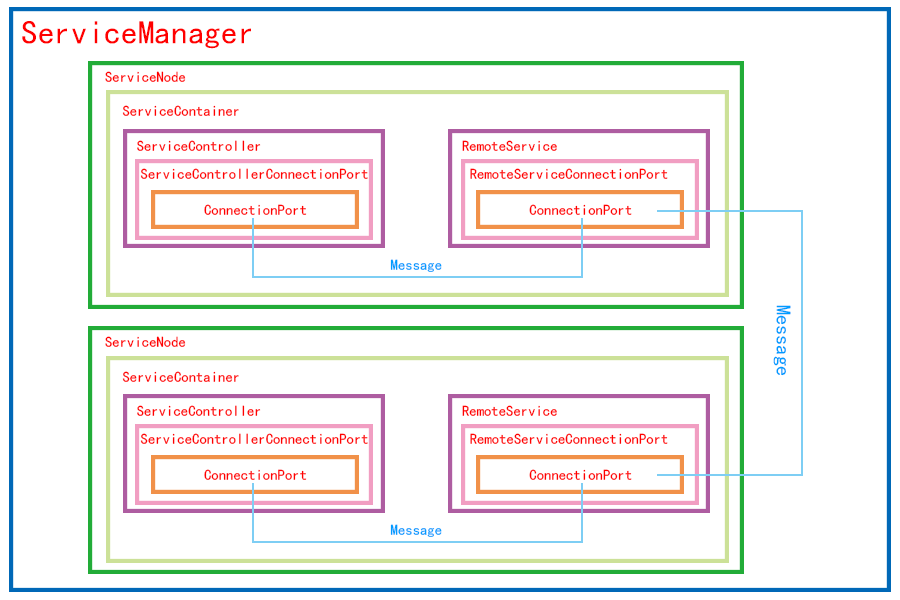
<style>
.page{position:relative;width:900px;height:600px;background:#ffffff}
.page>*{position:absolute;margin:0}
.t1{font:33.3px "SimHei";color:#ff0000}
.t2{font:14.7px "SimHei";color:#ff0000}
.t3{font:14.7px "SimHei";color:#009cff}
.t4{font:20.7px "SimHei";color:#009cff}
</style>
<div class="page">
<p class="t1" style="left:22px;top:21px;width:229px;height:28px">ServiceManager</p>
<p class="t2" style="left:105px;top:71px;width:81px;height:11px">ServiceNode</p>
<p class="t2" style="left:122px;top:105px;width:117px;height:11px">ServiceContainer</p>
<p class="t2" style="left:137px;top:140px;width:124px;height:11px">ServiceController</p>
<p class="t2" style="left:462px;top:140px;width:95px;height:11px">RemoteService</p>
<p class="t2" style="left:140px;top:168px;width:228px;height:11px">ServiceControllerConnectionPort</p>
<p class="t2" style="left:470px;top:168px;width:198px;height:11px">RemoteServiceConnectionPort</p>
<p class="t2" style="left:204px;top:204px;width:103px;height:11px">ConnectionPort</p>
<p class="t2" style="left:529px;top:204px;width:103px;height:11px">ConnectionPort</p>
<p class="t3" style="left:390px;top:259px;width:52px;height:13px">Message</p>
<p class="t4" style="left:773px;top:305px;width:18px;height:71px;rotate:90deg">Message</p>
<p class="t2" style="left:105px;top:336px;width:81px;height:11px">ServiceNode</p>
<p class="t2" style="left:122px;top:371px;width:117px;height:11px">ServiceContainer</p>
<p class="t2" style="left:137px;top:405px;width:124px;height:11px">ServiceController</p>
<p class="t2" style="left:462px;top:405px;width:95px;height:11px">RemoteService</p>
<p class="t2" style="left:140px;top:433px;width:228px;height:11px">ServiceControllerConnectionPort</p>
<p class="t2" style="left:470px;top:433px;width:198px;height:11px">RemoteServiceConnectionPort</p>
<p class="t2" style="left:204px;top:469px;width:103px;height:11px">ConnectionPort</p>
<p class="t2" style="left:529px;top:469px;width:103px;height:11px">ConnectionPort</p>
<p class="t3" style="left:390px;top:524px;width:52px;height:13px">Message</p>
</div>
